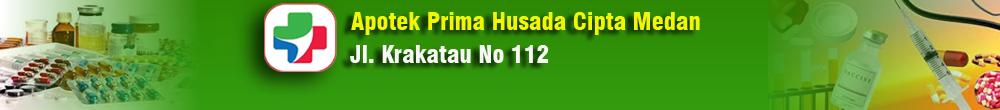
<style>
.page{position:relative;width:1000px;height:110px}
.page>*{position:absolute;margin:0}
.t1{font:24px "Swiss721BT-BlackCondensed";color:#f3f603}
.t2{font:24px "Swiss721BT-BlackCondensed";color:#f7f7f5}
</style>
<div class="page">
<p class="t1" style="left:351px;top:12px;width:349px;height:23px">Apotek Prima Husada Cipta Medan</p>
<p class="t2" style="left:350px;top:45px;width:199px;height:18px">Jl. Krakatau No 112</p>
</div>
